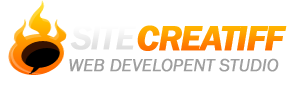
<style>
.page{position:relative;width:288px;height:86px;background:#ffffff}
.page>*{position:absolute;margin:0}
.t1{font:36px "FranklinGothic-MediumItalic";letter-spacing:-0.05em;color:#f1f1f1;font-weight:bold}
.t2{font:36px "FranklinGothic-DemiItalic";letter-spacing:-0.05em;font-weight:bold}
.t3{font:18px "FranklinGothic-BookItalic";letter-spacing:-0.01em;color:#9f9f9f;font-weight:bold}
</style>
<div class="page">
<p class="t1" style="left:70px;top:24px;width:67px;height:26px">SITE</p>
<p class="t2" style="left:137px;top:25px;width:150px;height:26px">CREATIFF</p>
<p class="t3" style="left:69px;top:58px;width:210px;height:14px">WEB DEVELOPENT STUDIO</p>
</div>
